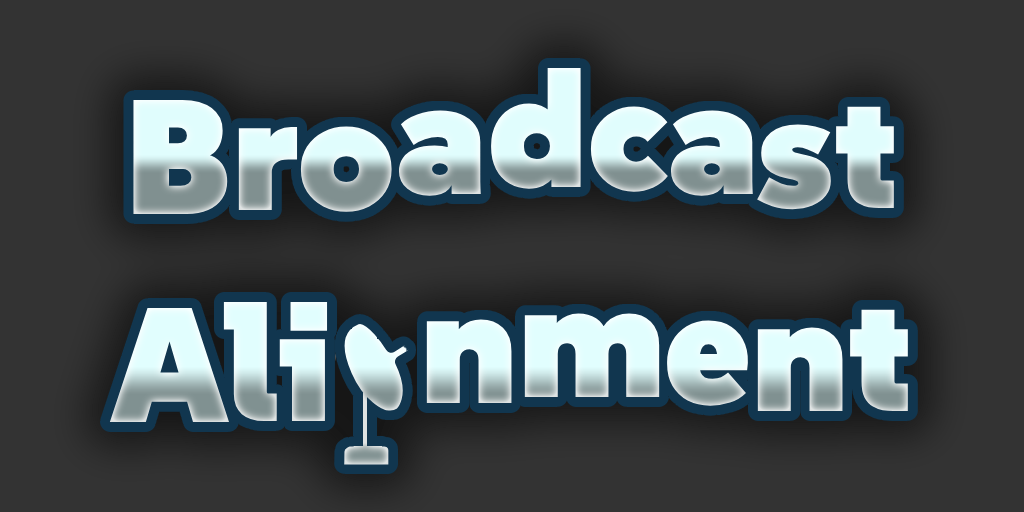
<style>
.page{position:relative;width:1024px;height:512px;background:#333333}
.page>*{position:absolute;margin:0}
.t1{font:163px "SUSE-Black";letter-spacing:0.004em}
.t2{font:163px "SUSE-Black";letter-spacing:0.004em;color:#e1fefe}
</style>
<div class="page">
<p class="t1" style="left:398px;top:68px;width:355px;height:128px">adca</p>
<p class="t1" style="left:109px;top:100px;width:799px;height:343px;text-align:center">Bro            st<br>Alig        ent</p>
<p class="t2" style="left:426px;top:313px;width:234px;height:90px">nm</p>
</div>
